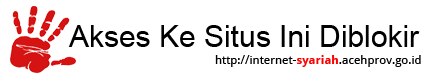
<style>
.page{position:relative;width:439px;height:84px;background:#ffffff}
.page>*{position:absolute;margin:0}
.t1{font:30px "ArialMT";color:#000000}
.t2{font:12px "DroidSans";color:#000000}
.t3{font:12px "DroidSans-Bold";color:#fd0000}
</style>
<div class="page">
<p class="t1" style="left:68px;top:25px;width:352px;height:22px">Akses Ke Situs Ini Diblokir</p>
<p class="t2" style="left:215px;top:55px;width:206px;height:12px">http://internet-<span class="t3">syariah</span>.acehprov.go.id</p>
</div>
